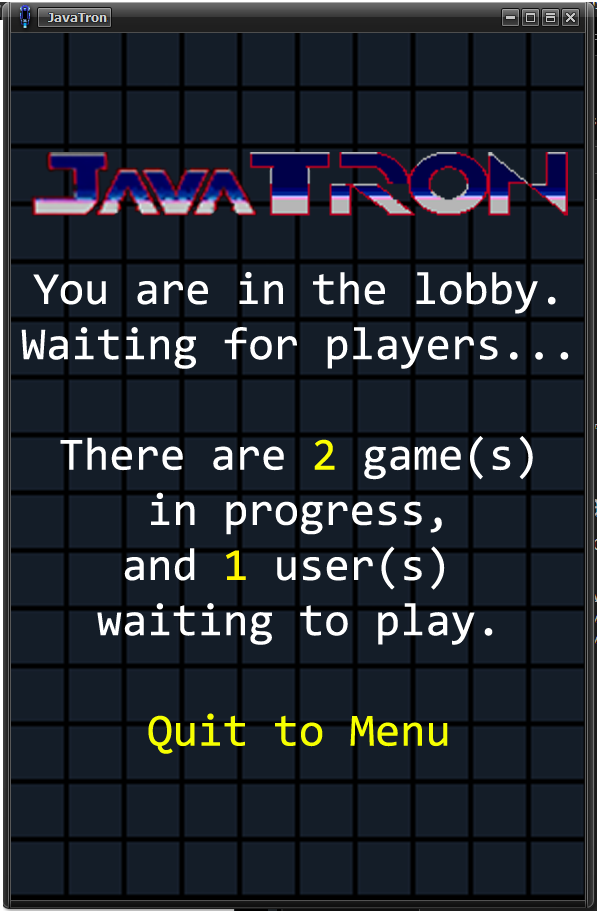
<style>
.page{position:relative;width:600px;height:919px;background:#141d28}
.page>*{position:absolute;margin:0}
.t1{font:46px "Consolas";color:#ffffff}
.t2{font:46px "Consolas";color:#fcff00}
.t3{font:46px "Consolas";color:#fff600}
.t4{font:46px "Consolas";color:#f6ff00}
</style>
<div class="page">
<p class="t1" style="left:21px;top:271px;width:548px;height:483px;text-align:center">You are in the lobby.<br>Waiting for players...<br><br>There are <span class="t2">2</span> game(s)<br>in progress,<br>and <span class="t3">1</span> user(s) <br>waiting to play.<br><br><span class="t4">Quit to Menu</span></p>
</div>
